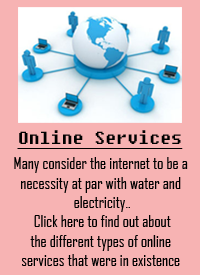
<style>
.page{position:relative;width:200px;height:275px;background:#f7b3b3}
.page>*{position:absolute;margin:0}
.t1{font:17.5px "Fixedsys";color:#000000;text-decoration:underline}
.t2{font:16.1px "AgencyFB-Reg";color:#000000}
</style>
<div class="page">
<p class="t1" style="left:17px;top:130px;width:166px;height:19px">Online Services</p>
<p class="t2" style="left:14px;top:157px;width:174px;height:109px;text-align:center">Many consider the internet to be a <br>necessity at par with water and <br>electricity..<br>Click here to find out about<br>the different types of online <br>services that were in existence</p>
</div>
